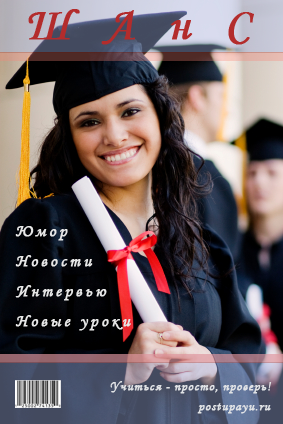
<style>
.page{position:relative;width:283px;height:424px}
.page>*{position:absolute;margin:0}
.t1{font:46.7px "MonotypeCorsiva";letter-spacing:0.72em;color:#b32c2c;font-weight:bold}
.t2{font:16.7px/30px "MonotypeCorsiva";letter-spacing:0.18em;color:#e7e7e7;font-weight:bold}
.t3{font:13.3px "MonotypeCorsiva";letter-spacing:0.04em;color:#e0e2e5;font-weight:bold}
</style>
<div class="page">
<p class="t1" style="left:28px;top:9px;width:226px;height:36px">ШАнС</p>
<p class="t2" style="left:15px;top:226px;width:116px;height:105px">Юмор<br>Новости<br>Интервью<br>Новые уроки</p>
<p class="t3" style="left:110px;top:381px;width:162px;height:13px">Учиться - просто, проверь!</p>
<p class="t3" style="left:197px;top:403px;width:74px;height:11px">postupayu.ru</p>
</div>
